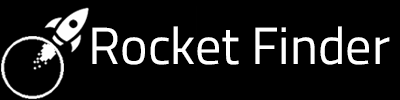
<style>
.page{position:relative;width:400px;height:100px;background:#000000}
.page>*{position:absolute;margin:0}
.t1{font:52.2px "TitilliumWeb-Regular";color:#ffffff}
</style>
<div class="page">
<p class="t1" style="left:92px;top:26px;width:298px;height:39px">Rocket Finder</p>
</div>
